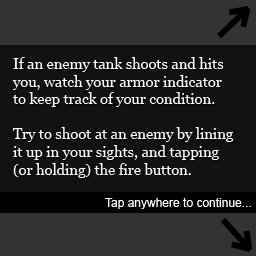
<style>
.page{position:relative;width:256px;height:256px;background:#121212}
.page>*{position:absolute;margin:0}
.t1{font:14.7px "Georgia";color:#fefefe}
.t2{font:12px "ArialMT";color:#ffffff}
</style>
<div class="page">
<p class="t1" style="left:12px;top:57px;width:222px;height:121px">If an enemy tank shoots and hits<br>you, watch your armor indicator<br>to keep track of your condition.<br><br>Try to shoot at an enemy by lining<br>it up in your sights, and tapping<br>(or holding) the fire button.</p>
<p class="t2" style="left:105px;top:198px;width:146px;height:11px">Tap anywhere to continue...</p>
</div>
